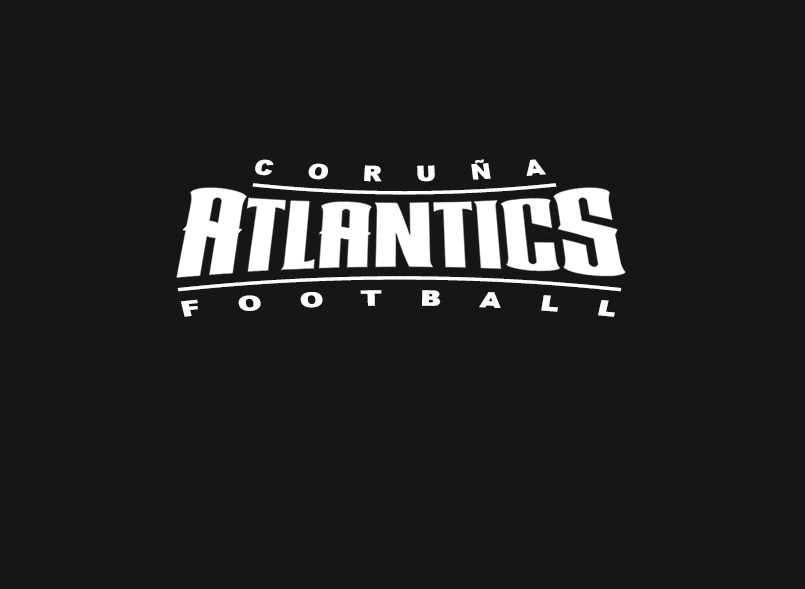
<style>
.page{position:relative;width:805px;height:589px;background:#161616}
.page>*{position:absolute;margin:0}
.t1{font:20px "Arial-Black";letter-spacing:1.38em;color:#ffffff;scale:1.25 1}
.t2{font:20.8px "Arial-Black";color:#ffffff}
</style>
<div class="page">
<p class="t1" style="left:255px;top:159px;width:291px;height:23px">CORUÑA</p>
<p class="t2" style="left:252px;top:183px;width:305px;height:12px">--------------------------------------------</p>
<p class="t2" style="left:177px;top:276px;width:445px;height:16px">---------------------------------------------------------</p>
<p class="t1" style="left:181px;top:290px;width:434px;height:27px">FOOTBALL</p>
</div>
